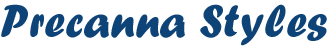
<style>
.page{position:relative;width:328px;height:47px;background:#ffffff}
.page>*{position:absolute;margin:0}
.t1{font:48px "ForteMT";color:#0d4477}
</style>
<div class="page">
<p class="t1" style="left:1px;top:4px;width:326px;height:42px">Precanna Styles</p>
</div>
